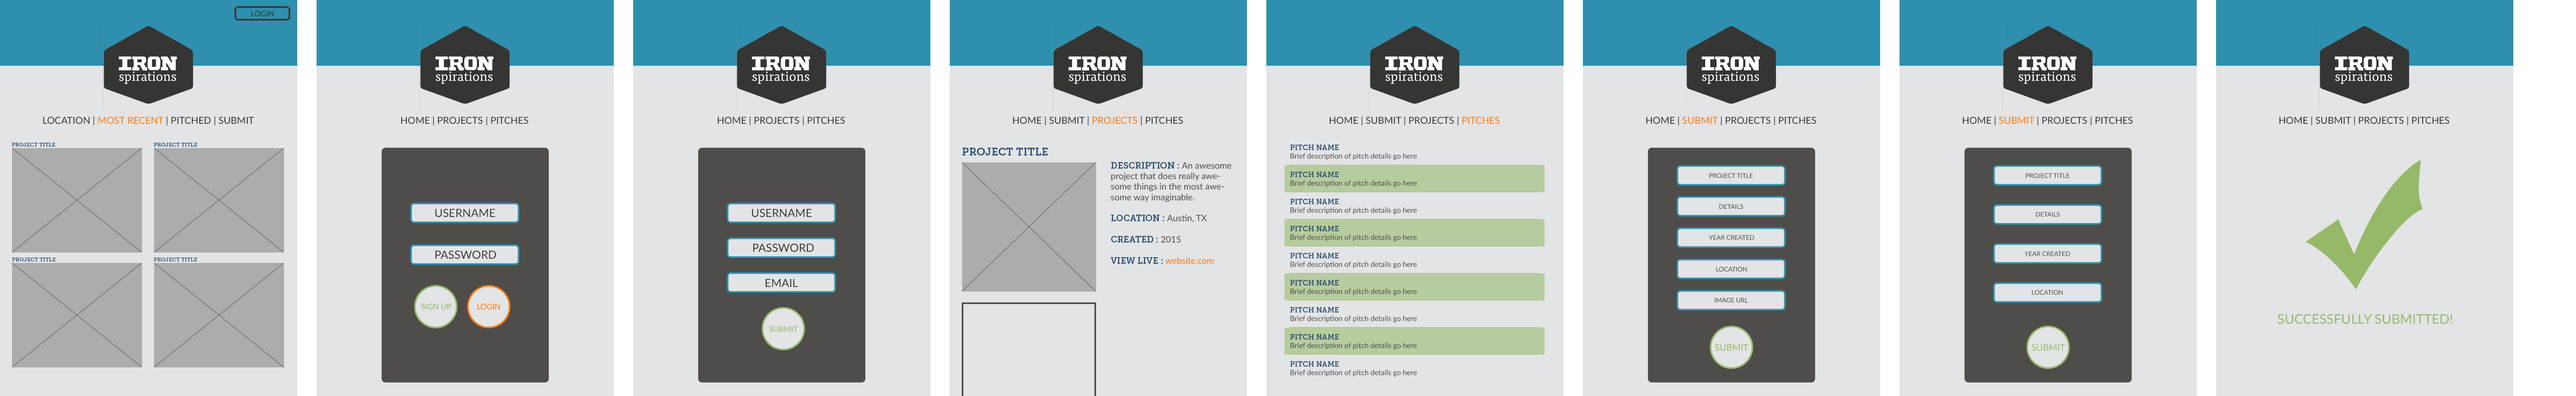
<style>
.page{position:relative;width:2576px;height:396px;background:#e2e4e5}
.page>*{position:absolute;margin:0}
.t1{font:7.7px "Lato-Regular";color:#353432}
.t2{font:9.6px "Lato-Regular";color:#353432}
.t3{font:9.6px "Lato-Regular";color:#fe7902}
.t4{font:5.4px "MuseoSlab-700";color:#2c4e71}
.t5{font:10.7px "MuseoSlab-700";color:#2c4e71}
.t6{font:7.3px "Lato-Regular";color:#4f4d4b}
.t7{font:7.3px "MuseoSlab-700";color:#2c4e71}
.t8{font:8.8px "Lato-Regular";color:#4f4d4b}
.t9{font:8.8px "MuseoSlab-700";color:#2c4e71}
.t10{font:8.8px "Lato-Regular";color:#fe7902}
.t11{font:6.4px "Lato-Regular";color:#4f4d4b}
.t12{font:11.3px "Lato-Regular";color:#353533}
.t13{font:7.7px "Lato-Regular";color:#95b969}
.t14{font:7.7px "Lato-Regular";color:#fe7902}
.t15{font:13.3px "Lato-Regular";color:#95b969}
.t16{font:9.1px "Lato-Regular";color:#95b969}
</style>
<div class="page">
<p class="t1" style="left:251px;top:10px;width:23px;height:7px">LOGIN</p>
<p class="t2" style="left:43px;top:116px;width:211px;height:10px">LOCATION | <span class="t3">MOST RECENT</span> | PITCHED | SUBMIT</p>
<p class="t2" style="left:401px;top:116px;width:127px;height:10px">HOME | PROJECTS | PITCHES</p>
<p class="t2" style="left:718px;top:116px;width:127px;height:10px">HOME | PROJECTS | PITCHES</p>
<p class="t2" style="left:1013px;top:116px;width:170px;height:10px">HOME | SUBMIT | <span class="t3">PROJECTS</span> | PITCHES</p>
<p class="t2" style="left:1329px;top:116px;width:171px;height:10px">HOME | SUBMIT | PROJECTS | <span class="t3">PITCHES</span></p>
<p class="t2" style="left:1646px;top:116px;width:170px;height:10px">HOME | <span class="t3">SUBMIT</span> | PROJECTS | PITCHES</p>
<p class="t2" style="left:1963px;top:116px;width:170px;height:10px">HOME | <span class="t3">SUBMIT</span> | PROJECTS | PITCHES</p>
<p class="t2" style="left:2279px;top:116px;width:170px;height:10px">HOME | SUBMIT | PROJECTS | PITCHES</p>
<p class="t4" style="left:12px;top:143px;width:43px;height:4px">PROJECT TITLE</p>
<p class="t4" style="left:154px;top:143px;width:43px;height:4px">PROJECT TITLE</p>
<p class="t5" style="left:962px;top:148px;width:86px;height:8px">PROJECT TITLE</p>
<p class="t6" style="left:1290px;top:145px;width:127px;height:15px"><span class="t7">PITCH NAME<br></span>Brief description of pitch details go here</p>
<p class="t8" style="left:1111px;top:162px;width:120px;height:102px"><span class="t9">DESCRIPTION : </span>An awesome<br>project that does really awesome things in the most awesome way imaginable.<br><span class="t9"><br>LOCATION : </span>Austin, TX<span class="t9"><br><br>CREATED : </span>2015<br><span class="t9"><br>VIEW LIVE : </span><span class="t10">website.com</span></p>
<p class="t6" style="left:1290px;top:172px;width:127px;height:15px"><span class="t7">PITCH NAME<br></span>Brief description of pitch details go here</p>
<p class="t11" style="left:1709px;top:173px;width:44px;height:5px">PROJECT TITLE</p>
<p class="t11" style="left:2026px;top:173px;width:44px;height:5px">PROJECT TITLE</p>
<p class="t12" style="left:435px;top:209px;width:60px;height:9px">USERNAME</p>
<p class="t12" style="left:752px;top:209px;width:60px;height:9px">USERNAME</p>
<p class="t6" style="left:1290px;top:199px;width:127px;height:15px"><span class="t7">PITCH NAME<br></span>Brief description of pitch details go here</p>
<p class="t11" style="left:1719px;top:204px;width:25px;height:5px">DETAILS</p>
<p class="t11" style="left:2036px;top:212px;width:24px;height:5px">DETAILS</p>
<p class="t6" style="left:1290px;top:226px;width:127px;height:16px"><span class="t7">PITCH NAME<br></span>Brief description of pitch details go here</p>
<p class="t12" style="left:753px;top:244px;width:61px;height:8px">PASSWORD</p>
<p class="t11" style="left:1709px;top:235px;width:45px;height:5px">YEAR CREATED</p>
<p class="t4" style="left:12px;top:258px;width:44px;height:4px">PROJECT TITLE</p>
<p class="t4" style="left:154px;top:258px;width:43px;height:4px">PROJECT TITLE</p>
<p class="t12" style="left:435px;top:251px;width:61px;height:8px">PASSWORD</p>
<p class="t6" style="left:1290px;top:253px;width:127px;height:16px"><span class="t7">PITCH NAME<br></span>Brief description of pitch details go here</p>
<p class="t11" style="left:2024px;top:251px;width:46px;height:6px">YEAR CREATED</p>
<p class="t11" style="left:1716px;top:267px;width:31px;height:5px">LOCATION</p>
<p class="t12" style="left:766px;top:279px;width:32px;height:8px">EMAIL</p>
<p class="t6" style="left:1290px;top:280px;width:127px;height:16px"><span class="t7">PITCH NAME<br></span>Brief description of pitch details go here</p>
<p class="t11" style="left:2032px;top:290px;width:31px;height:5px">LOCATION</p>
<p class="t13" style="left:421px;top:304px;width:30px;height:6px">SIGN UP</p>
<p class="t14" style="left:477px;top:304px;width:23px;height:6px">LOGIN</p>
<p class="t11" style="left:1714px;top:298px;width:34px;height:5px">IMAGE URL</p>
<p class="t6" style="left:1290px;top:307px;width:127px;height:16px"><span class="t7">PITCH NAME<br></span>Brief description of pitch details go here</p>
<p class="t15" style="left:2278px;top:314px;width:174px;height:10px">SUCCESSFULLY SUBMITTED!</p>
<p class="t13" style="left:769px;top:326px;width:29px;height:6px">SUBMIT</p>
<p class="t6" style="left:1290px;top:334px;width:127px;height:16px"><span class="t7">PITCH NAME<br></span>Brief description of pitch details go here</p>
<p class="t16" style="left:1715px;top:344px;width:34px;height:7px">SUBMIT</p>
<p class="t16" style="left:2031px;top:344px;width:34px;height:7px">SUBMIT</p>
<p class="t6" style="left:1290px;top:361px;width:127px;height:16px"><span class="t7">PITCH NAME<br></span>Brief description of pitch details go here</p>
</div>
